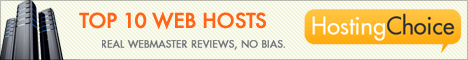
<style>
.page{position:relative;width:468px;height:60px;background:#fafafa}
.page>*{position:absolute;margin:0}
.t1{font:20px "Futura-Medium";letter-spacing:-0.04em;color:#ff6519;text-transform:uppercase;font-weight:bold}
.t2{font:10px "Futura-Medium";letter-spacing:0.015em;color:#6b6e73;text-transform:uppercase;font-weight:bold}
</style>
<div class="page">
<p class="t1" style="left:79px;top:12px;width:187px;height:17px">Top 10 Web Hosts</p>
<p class="t2" style="left:102px;top:40px;width:183px;height:10px">real webmaster reviews, no bias.</p>
</div>
